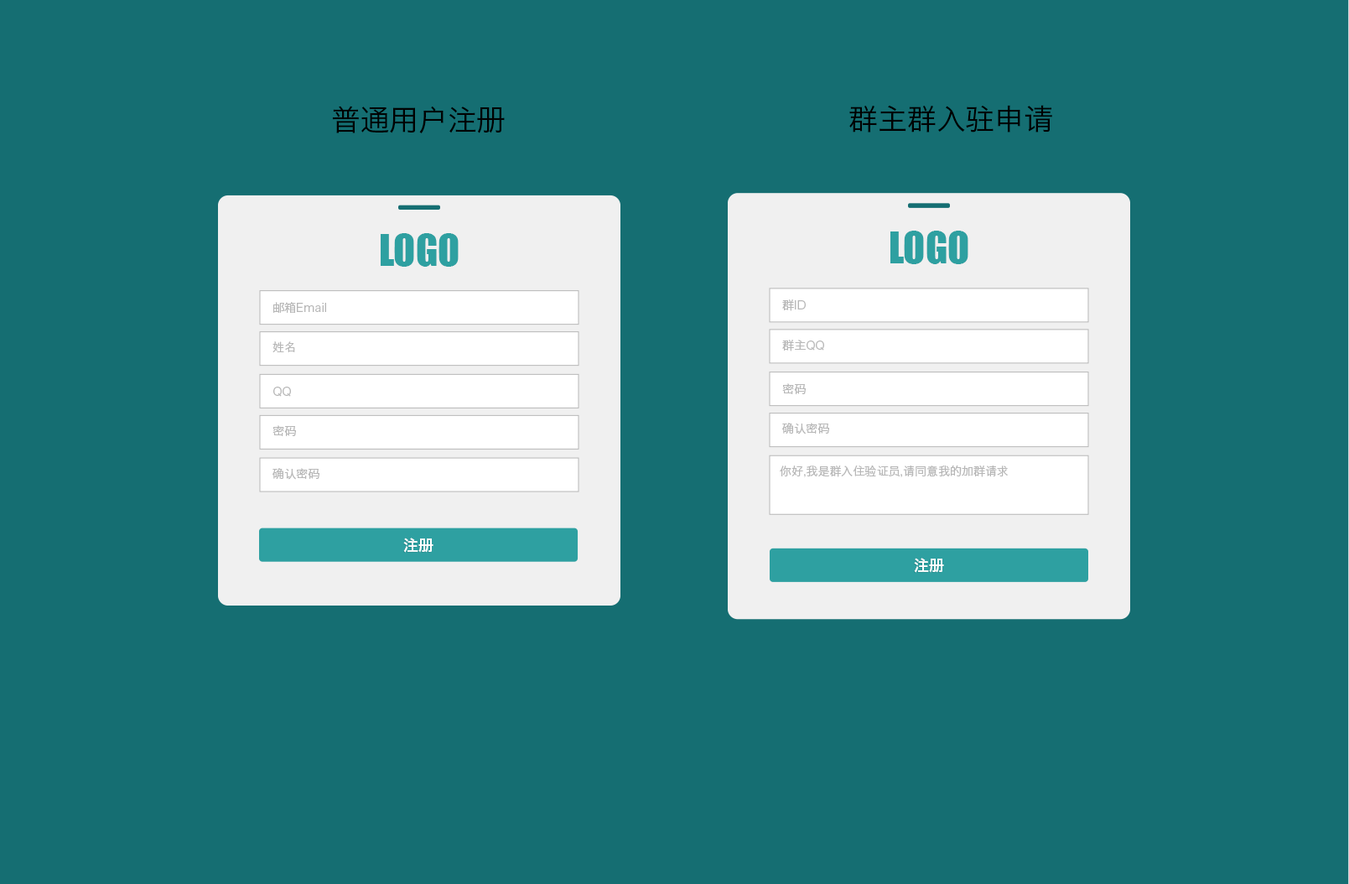
<style>
.page{position:relative;width:1349px;height:884px;background:#156e72}
.page>*{position:absolute;margin:0}
.t1{font:29.1px "HiraginoSansGB-W3";color:#000000}
.t2{font:40.2px "Impact";color:#2ea0a1;text-transform:uppercase}
.t3{font:11.7px "HiraginoSansGB-W3";color:#b7b7b7}
.t4{font:15.1px "HiraginoSansGB-W6";color:#ffffff;text-transform:uppercase}
</style>
<div class="page">
<p class="t1" style="left:332px;top:106px;width:173px;height:27px">普通用户注册</p>
<p class="t1" style="left:849px;top:105px;width:203px;height:27px">群主群入驻申请</p>
<p class="t2" style="left:381px;top:233px;width:78px;height:34px">logo</p>
<p class="t2" style="left:891px;top:231px;width:78px;height:33px">logo</p>
<p class="t3" style="left:273px;top:302px;width:53px;height:11px">邮箱Email</p>
<p class="t3" style="left:782px;top:299px;width:24px;height:12px">群ID</p>
<p class="t3" style="left:273px;top:341px;width:22px;height:11px">姓名</p>
<p class="t3" style="left:782px;top:340px;width:42px;height:11px">群主QQ</p>
<p class="t3" style="left:273px;top:387px;width:18px;height:10px">QQ</p>
<p class="t3" style="left:782px;top:383px;width:24px;height:11px">密码</p>
<p class="t3" style="left:273px;top:425px;width:23px;height:11px">密码</p>
<p class="t3" style="left:782px;top:423px;width:47px;height:11px">确认密码</p>
<p class="t3" style="left:273px;top:468px;width:46px;height:12px">确认密码</p>
<p class="t3" style="left:780px;top:465px;width:228px;height:12px">你好,我是群入住验证员,请同意我的加群请求</p>
<p class="t4" style="left:403px;top:537px;width:31px;height:16px">注册</p>
<p class="t4" style="left:914px;top:558px;width:30px;height:15px">注册</p>
</div>
